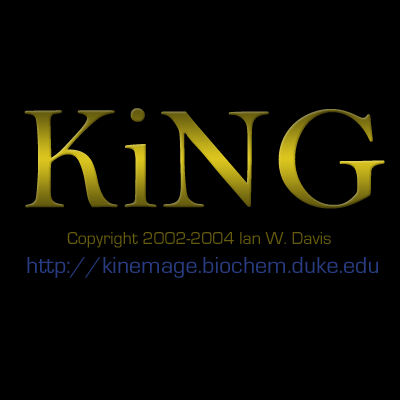
<style>
.page{position:relative;width:400px;height:400px;background:#000000}
.page>*{position:absolute;margin:0}
.t1{font:150px "BellMT"}
.t2{font:18px "EurostileRegular";color:#665c0e}
.t3{font:24px "EurostileRegular";color:#283c82}
</style>
<div class="page">
<p class="t1" style="left:24px;top:108px;width:361px;height:101px">KiNG</p>
<p class="t2" style="left:67px;top:232px;width:264px;height:16px">Copyright 2002-2004 Ian W. Davis</p>
<p class="t3" style="left:27px;top:257px;width:351px;height:21px">http://kinemage.biochem.duke.edu</p>
</div>
